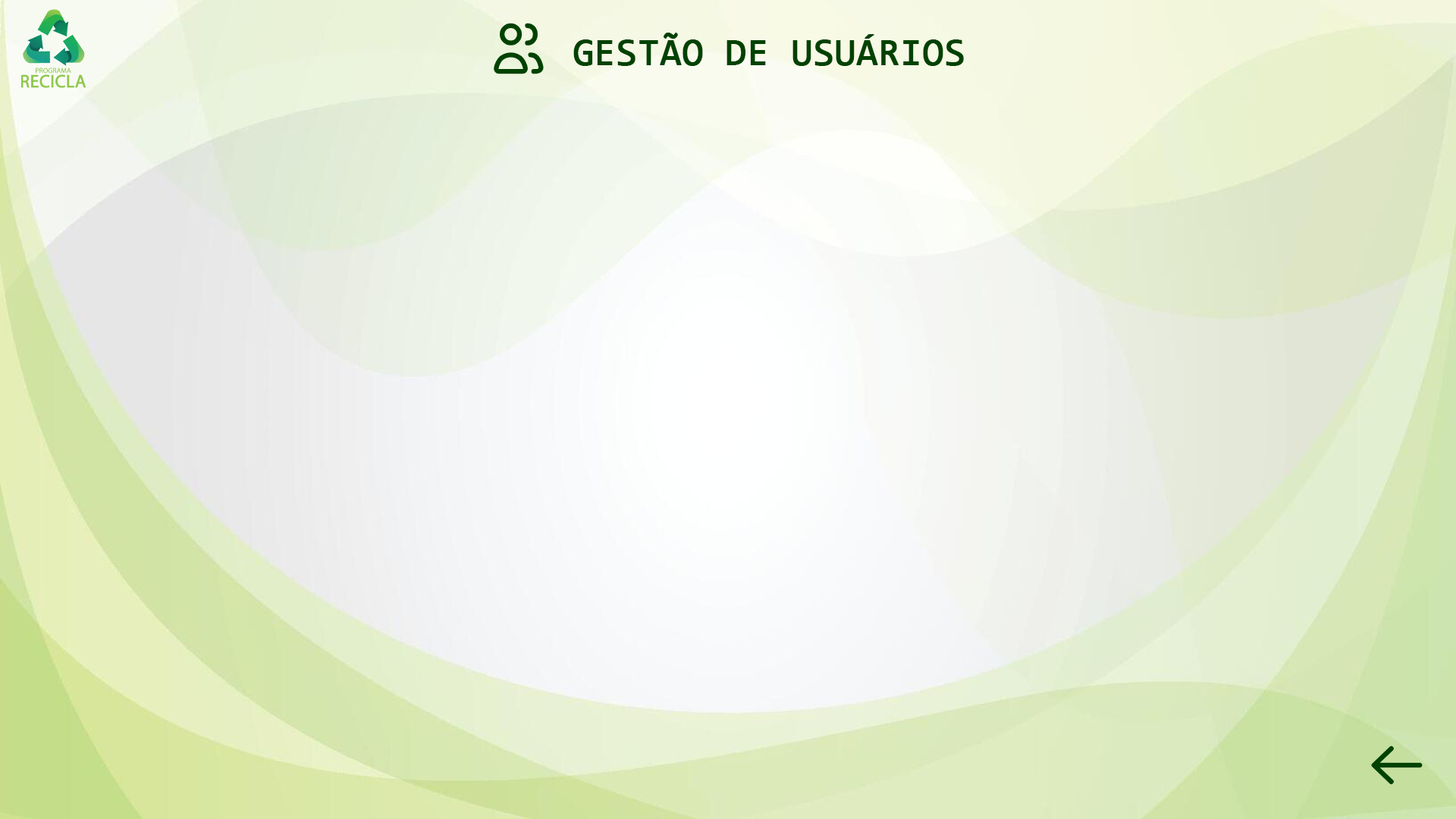
<style>
.page{position:relative;width:1456px;height:819px}
.page>*{position:absolute;margin:0}
.t1{font:37.9px "Consolas";color:#004201;font-weight:bold}
</style>
<div class="page">
<p class="t1" style="left:573px;top:33px;width:391px;height:33px">GESTÃO DE USUÁRIOS</p>
</div>
